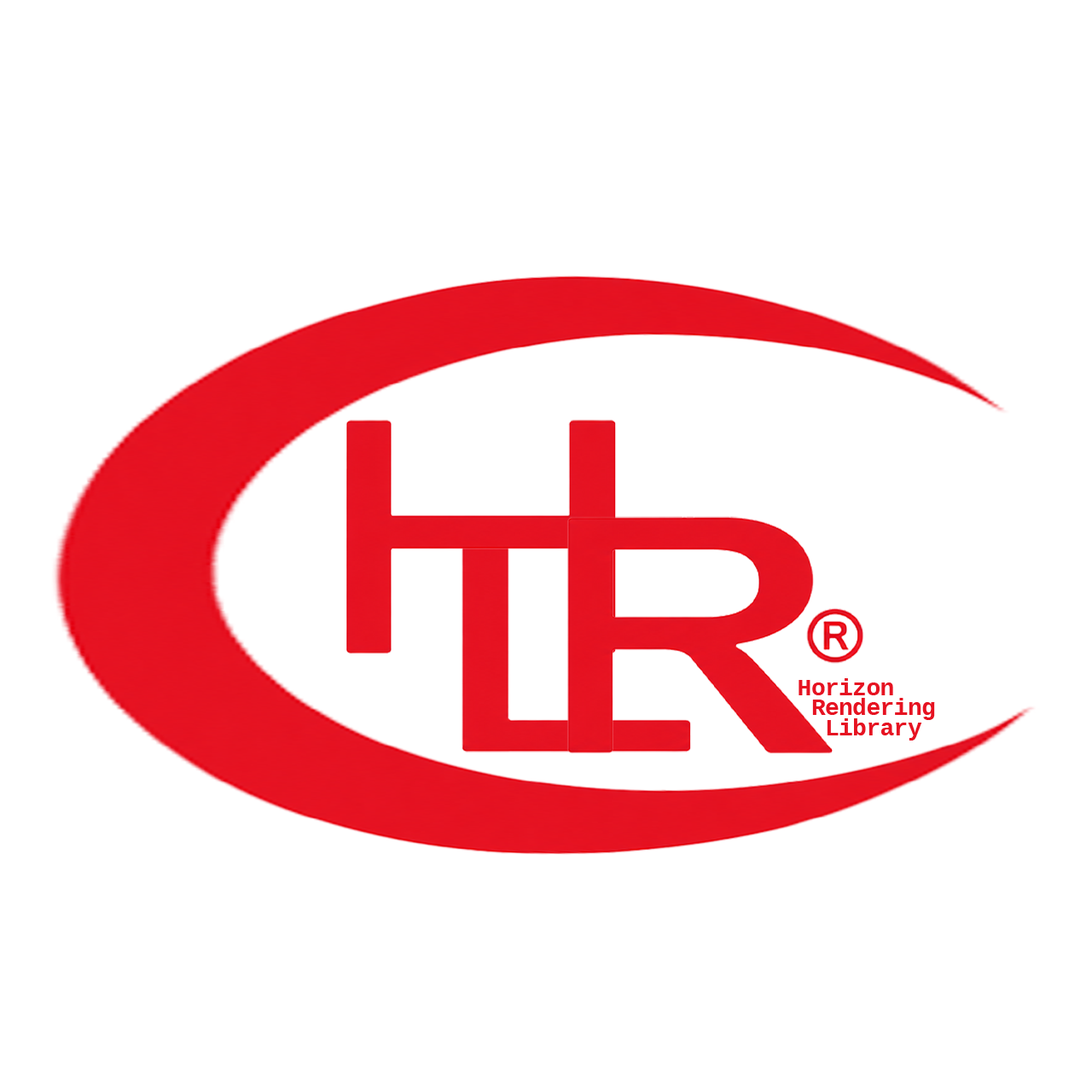
<style>
.page{position:relative;width:1092px;height:1092px;background:#ffffff}
.page>*{position:absolute;margin:0}
.t1{font:23.7px/19.8px "Cousine-Bold";letter-spacing:-0.02em;color:#e61221}
</style>
<div class="page">
<p class="t1" style="left:799px;top:678px;width:136px;height:63px">Horizon<br> Rendering<br>  Library</p>
</div>
